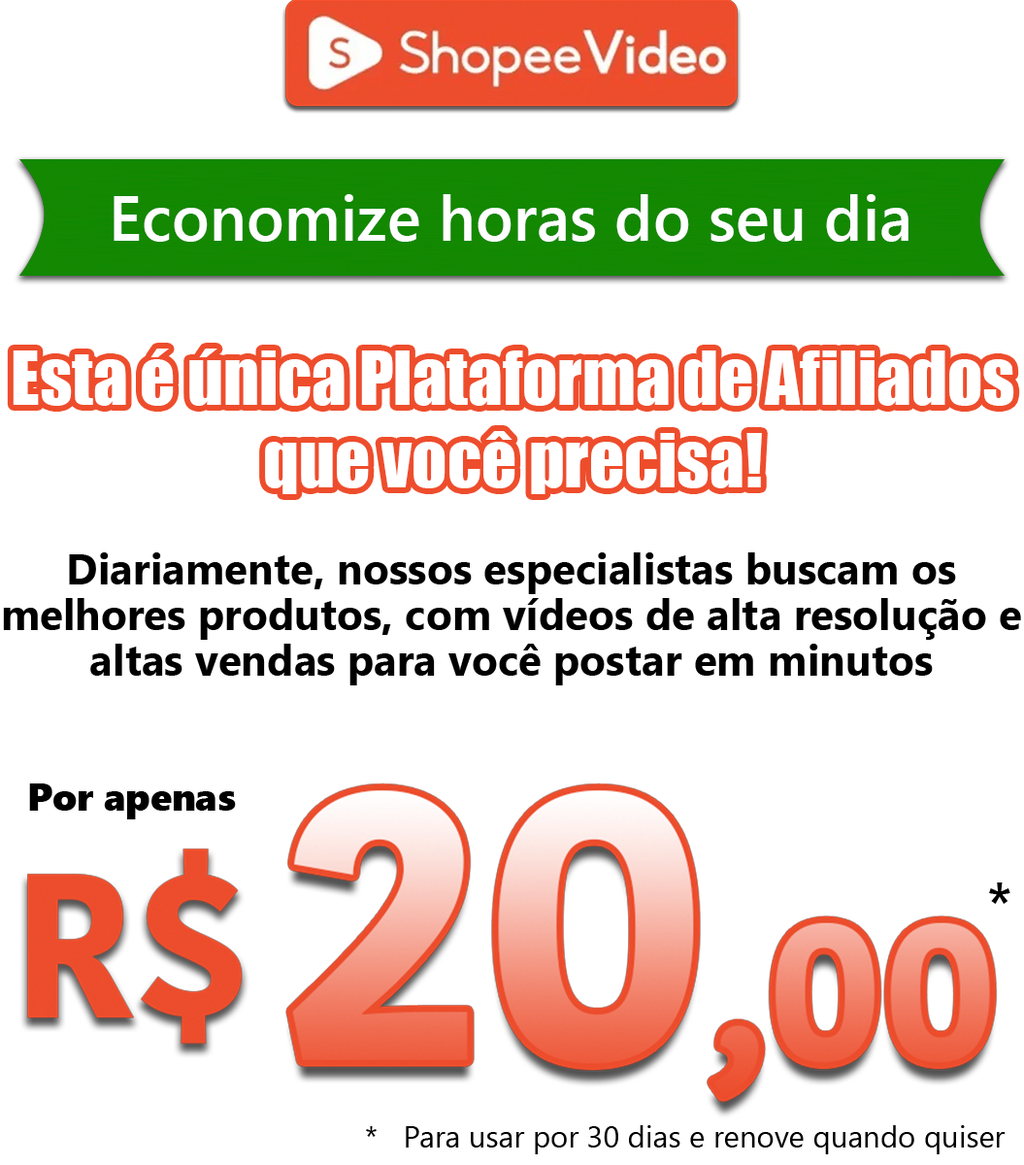
<style>
.page{position:relative;width:1024px;height:1165px;background:#ffffff}
.page>*{position:absolute;margin:0}
.t1{font:63.5px "SegoeUI-Semibold";color:#ffffff}
.t2{font:68.8px "Impact";color:#ffffff}
.t3{font:42.9px/45.5px "SegoeUI-Bold";color:#000000}
.t4{font:38.4px "SegoeUIBlack";color:#010000}
.t5{font:57.5px "SegoeUI-Semibold";color:#010000}
.t6{font:30.2px "SegoeUI";color:#010000}
</style>
<div class="page">
<p class="t1" style="left:114px;top:194px;width:794px;height:48px">Economize horas do seu dia</p>
<p class="t2" style="left:13px;top:348px;width:1001px;height:146px;text-align:center">Esta é única Plataforma de Afiliados<br>que você precisa!</p>
<p class="t3" style="left:3px;top:552px;width:1018px;height:133px;text-align:center">Diariamente, nossos especialistas buscam os<br>melhores produtos, com vídeos de alta resolução e<br>altas vendas para você postar em minutos</p>
<p class="t4" style="left:29px;top:783px;width:207px;height:36px">Por apenas</p>
<p class="t5" style="left:989px;top:882px;width:21px;height:22px">*</p>
<p class="t6" style="left:366px;top:1125px;width:639px;height:29px">Para usar por 30 dias e renove quando quiser</p>
</div>
